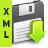
<style>
.page{position:relative;width:48px;height:48px;background:#bcee23}
.page>*{position:absolute;margin:0}
.t1{font:9.5px "AgencyFB-Bold";color:#232322;scale:1.52 1}
</style>
<div class="page">
<p class="t1" style="left:3px;top:8px;width:7px;height:30px;text-align:center">X<br>M<br>L</p>
</div>
